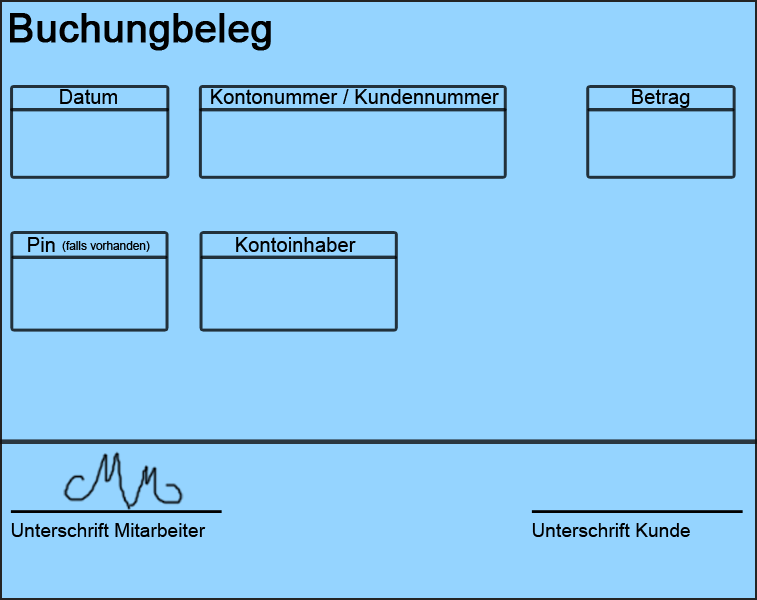
<style>
.page{position:relative;width:757px;height:600px;background:#95d4ff}
.page>*{position:absolute;margin:0}
.t1{font:39.7px "ArialMT";color:#000000;font-weight:bold}
.t2{font:20.3px "ArialMT";color:#000000}
.t3{font:11.8px "ArialMT";color:#000000}
.t4{font:19.2px "ArialMT";color:#000000}
</style>
<div class="page">
<p class="t1" style="left:10px;top:13px;width:261px;height:38px">Buchungbeleg</p>
<p class="t2" style="left:60px;top:89px;width:57px;height:15px">Datum</p>
<p class="t2" style="left:211px;top:89px;width:288px;height:15px">Kontonummer / Kundennummer</p>
<p class="t2" style="left:632px;top:89px;width:58px;height:19px">Betrag</p>
<p class="t2" style="left:28px;top:237px;width:27px;height:15px">Pin</p>
<p class="t3" style="left:62px;top:241px;width:88px;height:11px">(falls vorhanden)</p>
<p class="t2" style="left:236px;top:237px;width:120px;height:15px">Kontoinhaber</p>
<p class="t4" style="left:11px;top:523px;width:195px;height:14px">Unterschrift Mitarbeiter</p>
<p class="t4" style="left:532px;top:523px;width:158px;height:14px">Unterschrift Kunde</p>
</div>
